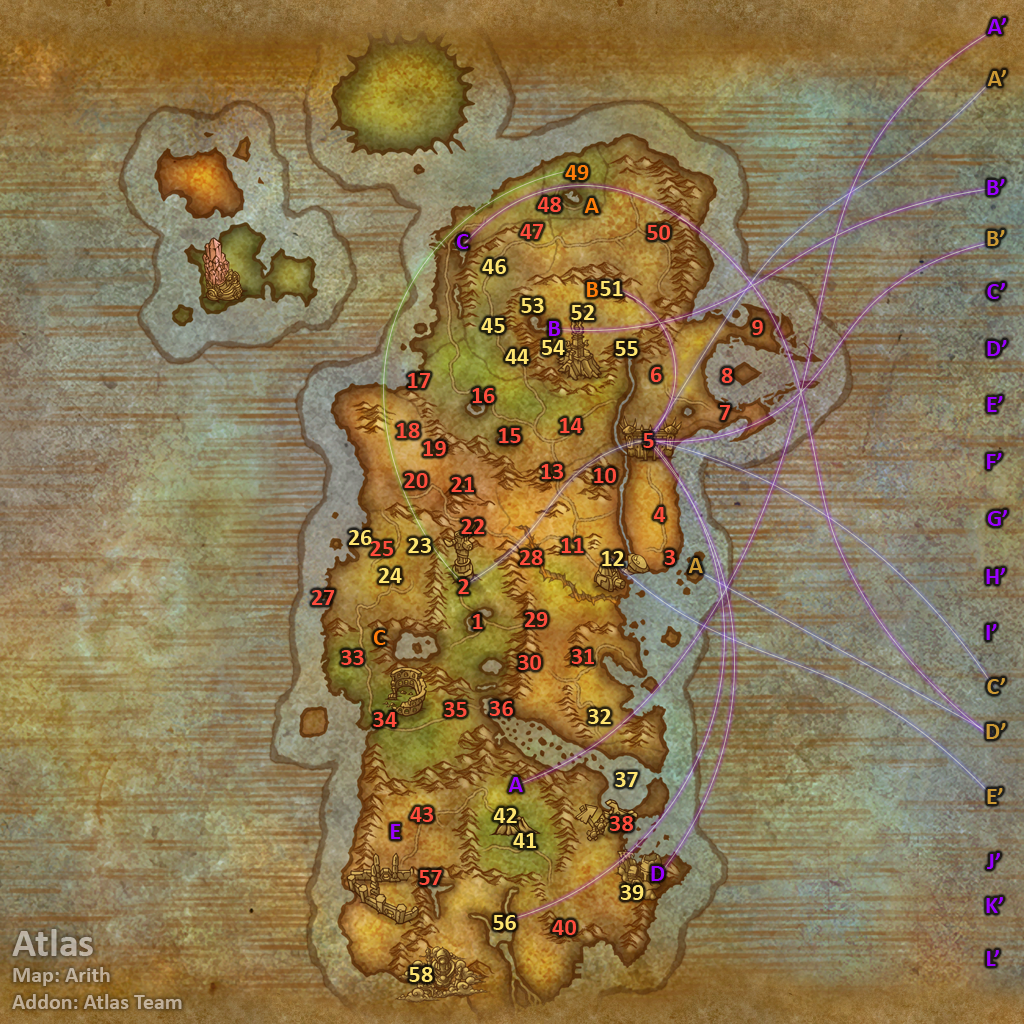
<style>
.page{position:relative;width:1024px;height:1024px}
.page>*{position:absolute;margin:0}
.t1{font:24px "Calibri-Bold";color:#9900ff}
.t2{font:24px "Calibri-Bold";color:#cc9933}
.t3{font:24px "Calibri-Bold";color:#ff7d0a}
.t4{font:24px "Calibri-Bold";color:#ff4c3c}
.t5{font:24px "Calibri-Bold";color:#fee570}
.t6{font:22px "Calibri-Bold";color:#bdaf9c}
.t7{font:40px "Calibri-Bold";color:#bdaf9c}
</style>
<div class="page">
<p class="t1" style="left:987px;top:18px;width:19px;height:16px">A’</p>
<p class="t2" style="left:987px;top:70px;width:19px;height:16px">A’</p>
<p class="t3" style="left:565px;top:165px;width:24px;height:15px">49</p>
<p class="t1" style="left:987px;top:179px;width:18px;height:16px">B’</p>
<p class="t4" style="left:537px;top:197px;width:24px;height:15px">48</p>
<p class="t3" style="left:584px;top:198px;width:15px;height:15px">A</p>
<p class="t4" style="left:520px;top:224px;width:24px;height:15px">47</p>
<p class="t4" style="left:647px;top:225px;width:23px;height:15px">50</p>
<p class="t2" style="left:987px;top:230px;width:18px;height:16px">B’</p>
<p class="t1" style="left:457px;top:234px;width:12px;height:15px">C</p>
<p class="t5" style="left:482px;top:259px;width:24px;height:15px">46</p>
<p class="t5" style="left:600px;top:281px;width:23px;height:15px">51</p>
<p class="t3" style="left:587px;top:282px;width:12px;height:15px">B</p>
<p class="t1" style="left:987px;top:283px;width:18px;height:16px">C’</p>
<p class="t5" style="left:521px;top:298px;width:23px;height:15px">53</p>
<p class="t5" style="left:571px;top:305px;width:24px;height:15px">52</p>
<p class="t5" style="left:481px;top:318px;width:24px;height:15px">45</p>
<p class="t1" style="left:549px;top:321px;width:12px;height:15px">B</p>
<p class="t4" style="left:752px;top:320px;width:11px;height:15px">9</p>
<p class="t5" style="left:542px;top:340px;width:23px;height:15px">54</p>
<p class="t5" style="left:615px;top:341px;width:23px;height:15px">55</p>
<p class="t1" style="left:987px;top:340px;width:20px;height:16px">D’</p>
<p class="t5" style="left:505px;top:349px;width:24px;height:15px">44</p>
<p class="t4" style="left:408px;top:373px;width:23px;height:15px">17</p>
<p class="t4" style="left:651px;top:367px;width:11px;height:15px">6</p>
<p class="t4" style="left:721px;top:368px;width:12px;height:15px">8</p>
<p class="t4" style="left:472px;top:388px;width:23px;height:15px">16</p>
<p class="t1" style="left:987px;top:396px;width:16px;height:16px">E’</p>
<p class="t4" style="left:720px;top:405px;width:11px;height:15px">7</p>
<p class="t4" style="left:397px;top:423px;width:23px;height:15px">18</p>
<p class="t4" style="left:560px;top:418px;width:23px;height:15px">14</p>
<p class="t4" style="left:499px;top:428px;width:22px;height:15px">15</p>
<p class="t4" style="left:643px;top:433px;width:11px;height:15px">5</p>
<p class="t4" style="left:423px;top:441px;width:23px;height:15px">19</p>
<p class="t1" style="left:987px;top:453px;width:15px;height:16px">F’</p>
<p class="t4" style="left:404px;top:473px;width:24px;height:15px">20</p>
<p class="t4" style="left:541px;top:464px;width:22px;height:15px">13</p>
<p class="t4" style="left:594px;top:468px;width:22px;height:15px">10</p>
<p class="t4" style="left:451px;top:477px;width:23px;height:15px">21</p>
<p class="t4" style="left:653px;top:507px;width:13px;height:15px">4</p>
<p class="t1" style="left:987px;top:510px;width:20px;height:16px">G’</p>
<p class="t4" style="left:461px;top:519px;width:24px;height:15px">22</p>
<p class="t5" style="left:349px;top:530px;width:23px;height:15px">26</p>
<p class="t4" style="left:370px;top:541px;width:23px;height:15px">25</p>
<p class="t5" style="left:408px;top:538px;width:23px;height:15px">23</p>
<p class="t4" style="left:561px;top:538px;width:23px;height:15px">11</p>
<p class="t4" style="left:520px;top:550px;width:23px;height:15px">28</p>
<p class="t5" style="left:602px;top:551px;width:22px;height:15px">12</p>
<p class="t4" style="left:665px;top:550px;width:10px;height:15px">3</p>
<p class="t2" style="left:688px;top:558px;width:15px;height:15px">A</p>
<p class="t5" style="left:379px;top:568px;width:23px;height:15px">24</p>
<p class="t1" style="left:986px;top:568px;width:19px;height:16px">H’</p>
<p class="t4" style="left:458px;top:579px;width:11px;height:15px">2</p>
<p class="t4" style="left:312px;top:590px;width:23px;height:15px">27</p>
<p class="t4" style="left:473px;top:614px;width:10px;height:15px">1</p>
<p class="t4" style="left:525px;top:612px;width:23px;height:15px">29</p>
<p class="t3" style="left:374px;top:630px;width:12px;height:15px">C</p>
<p class="t1" style="left:986px;top:624px;width:11px;height:16px">I’</p>
<p class="t4" style="left:341px;top:650px;width:23px;height:15px">33</p>
<p class="t4" style="left:572px;top:649px;width:22px;height:15px">31</p>
<p class="t4" style="left:518px;top:655px;width:23px;height:15px">30</p>
<p class="t2" style="left:987px;top:678px;width:18px;height:16px">C’</p>
<p class="t4" style="left:444px;top:702px;width:23px;height:15px">35</p>
<p class="t4" style="left:490px;top:701px;width:23px;height:15px">36</p>
<p class="t4" style="left:373px;top:712px;width:24px;height:15px">34</p>
<p class="t5" style="left:588px;top:709px;width:23px;height:15px">32</p>
<p class="t2" style="left:986px;top:723px;width:20px;height:16px">D’</p>
<p class="t5" style="left:615px;top:772px;width:23px;height:15px">37</p>
<p class="t1" style="left:508px;top:777px;width:15px;height:15px">A</p>
<p class="t2" style="left:987px;top:788px;width:16px;height:16px">E’</p>
<p class="t4" style="left:410px;top:807px;width:23px;height:15px">43</p>
<p class="t5" style="left:493px;top:808px;width:24px;height:15px">42</p>
<p class="t4" style="left:610px;top:816px;width:23px;height:15px">38</p>
<p class="t1" style="left:391px;top:824px;width:10px;height:15px">E</p>
<p class="t5" style="left:513px;top:833px;width:23px;height:15px">41</p>
<p class="t1" style="left:987px;top:853px;width:13px;height:16px">J’</p>
<p class="t4" style="left:419px;top:870px;width:23px;height:15px">57</p>
<p class="t1" style="left:651px;top:866px;width:14px;height:15px">D</p>
<p class="t5" style="left:621px;top:885px;width:23px;height:15px">39</p>
<p class="t1" style="left:986px;top:897px;width:17px;height:16px">K’</p>
<p class="t5" style="left:493px;top:915px;width:23px;height:15px">56</p>
<p class="t6" style="left:12px;top:929px;width:170px;height:80px"><span class="t7">Atlas<br></span>Map: Arith<br>Addon: Atlas Team</p>
<p class="t4" style="left:552px;top:920px;width:24px;height:15px">40</p>
<p class="t1" style="left:987px;top:950px;width:12px;height:16px">L’</p>
<p class="t5" style="left:409px;top:967px;width:24px;height:15px">58</p>
</div>
